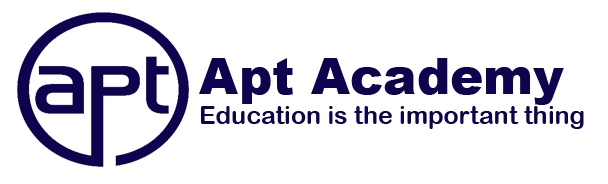
<style>
.page{position:relative;width:608px;height:184px;background:#ffffff}
.page>*{position:absolute;margin:0}
.t1{font:12px "Arial-Black";color:#0f034f}
.t2{font:25px "ArialRoundedMTBold";color:#0f034f}
</style>
<div class="page">
<p class="t1" style="left:199px;top:58px;width:365px;height:47px">Apt Academy</p>
<p class="t2" style="left:201px;top:106px;width:383px;height:23px">Education is the important thing</p>
</div>
